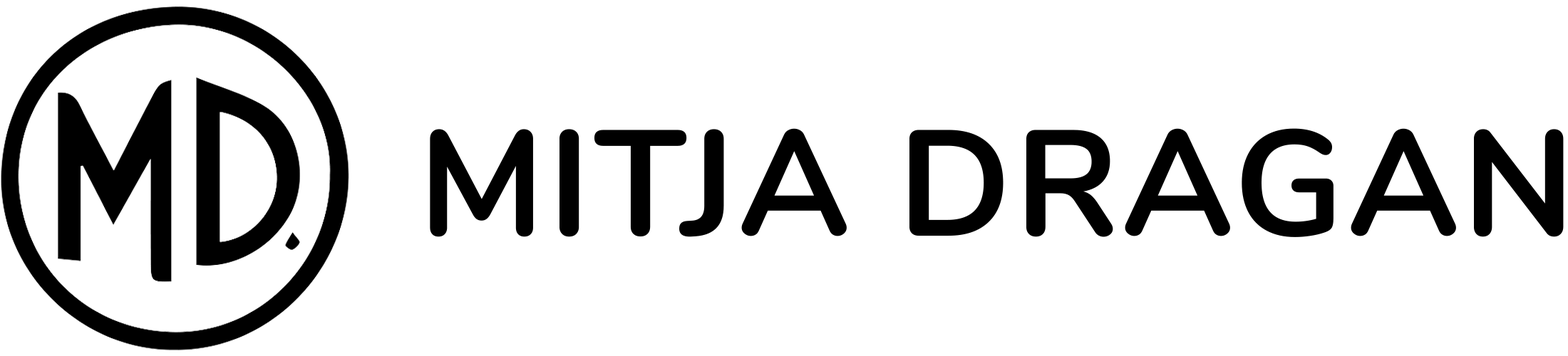
<style>
.page{position:relative;width:1568px;height:356px;background:#ffffff}
.page>*{position:absolute;margin:0}
.t1{font:150.1px "Nunito-Bold";letter-spacing:0.025em;color:#000000}
</style>
<div class="page">
<p class="t1" style="left:430px;top:128px;width:1134px;height:109px">MITJA DRAGAN</p>
</div>
